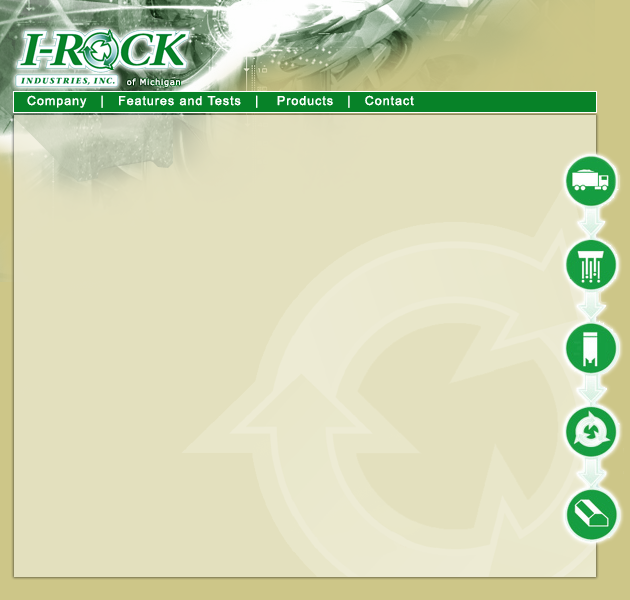
<style>
.page{position:relative;width:630px;height:600px;background:#e3e0be}
.page>*{position:absolute;margin:0}
.t1{font:12.5px "ArialMT";letter-spacing:0.05em;color:#ffffff;font-weight:bold}
</style>
<div class="page">
<p class="t1" style="left:27px;top:95px;width:387px;height:13px">Company   |   Features and Tests   |    Products   |   Contact</p>
</div>
